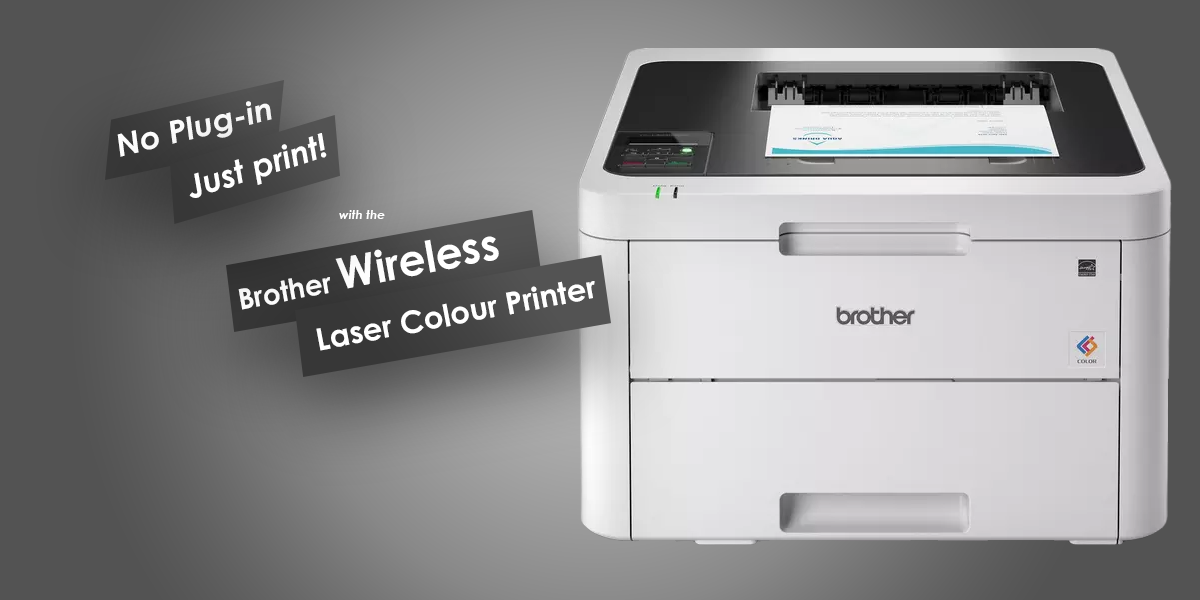
<style>
.page{position:relative;width:1200px;height:600px}
.page>*{position:absolute;margin:0}
.t1{font:31.2px "CenturyGothic-BoldItalic";color:#ffffff;scale:1.03 1}
.t2{font:32.3px "CenturyGothic-BoldItalic";color:#ffffff}
.t3{font:12.3px "CenturyGothic-BoldItalic";color:#ffffff}
.t4{font:43.7px "CenturyGothic-Bold";color:#ffffff}
.t5{font:28.7px "CenturyGothic-Bold";color:#ffffff}
.t6{font:30.7px "CenturyGothic-Bold";color:#ffffff}
</style>
<div class="page">
<p class="t1" style="left:117px;top:101px;width:155px;height:56px;rotate:-14deg">No Plug-in</p>
<p class="t2" style="left:189px;top:133px;width:138px;height:65px;rotate:-18deg">Just print!</p>
<p class="t3" style="left:339px;top:210px;width:46px;height:9px">with the</p>
<p class="t4" style="left:238px;top:236px;width:261px;height:74px;rotate:-11deg"><span class="t5">Brother </span>Wireless</p>
<p class="t6" style="left:316px;top:281px;width:279px;height:70px;rotate:-11deg">Laser Colour Printer</p>
</div>
